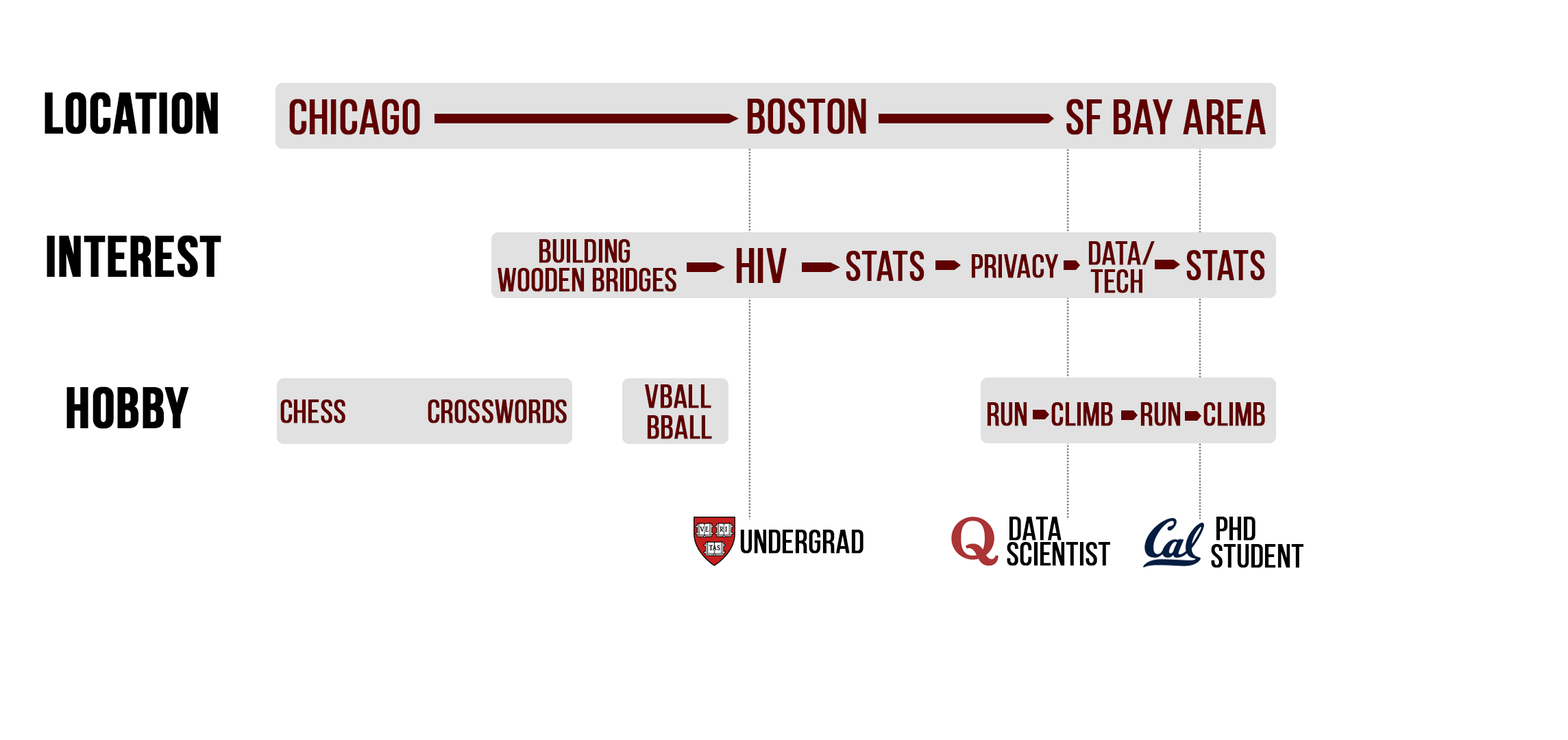
<style>
.page{position:relative;width:1568px;height:740px;background:#ffffff}
.page>*{position:absolute;margin:0}
.t1{font:57.7px "BebasNeueBold";color:#000000;font-weight:bold}
.t2{font:49.3px "BebasNeueRegular";color:#600000;font-weight:bold}
.t3{font:32.9px "BebasNeueRegular";color:#600000;font-weight:bold}
.t4{font:41.1px "BebasNeueRegular";color:#600000;font-weight:bold}
.t5{font:32.9px "BebasNeueRegular";color:#000000;font-weight:bold}
</style>
<div class="page">
<p class="t1" style="left:45px;top:92px;width:173px;height:42px">location</p>
<p class="t2" style="left:289px;top:99px;width:131px;height:36px">Chicago</p>
<p class="t2" style="left:747px;top:98px;width:119px;height:36px">Boston</p>
<p class="t2" style="left:1066px;top:99px;width:200px;height:36px">SF Bay area</p>
<p class="t1" style="left:47px;top:235px;width:174px;height:43px">interest</p>
<p class="t3" style="left:539px;top:239px;width:91px;height:24px">Building</p>
<p class="t3" style="left:1088px;top:241px;width:67px;height:24px">Data/</p>
<p class="t2" style="left:736px;top:248px;width:51px;height:35px">HIV</p>
<p class="t4" style="left:846px;top:251px;width:78px;height:30px">Stats</p>
<p class="t3" style="left:971px;top:254px;width:88px;height:24px">privacy</p>
<p class="t4" style="left:1186px;top:250px;width:79px;height:30px">Stats</p>
<p class="t3" style="left:498px;top:268px;width:178px;height:24px">wooden bridges</p>
<p class="t3" style="left:1090px;top:269px;width:52px;height:24px">TECH</p>
<p class="t1" style="left:66px;top:387px;width:123px;height:42px">hobby</p>
<p class="t3" style="left:645px;top:384px;width:66px;height:24px">vball</p>
<p class="t3" style="left:280px;top:400px;width:65px;height:24px">Chess</p>
<p class="t3" style="left:428px;top:400px;width:139px;height:24px">Crosswords</p>
<p class="t3" style="left:987px;top:402px;width:40px;height:24px">Run</p>
<p class="t3" style="left:1051px;top:402px;width:62px;height:24px">climb</p>
<p class="t3" style="left:1140px;top:402px;width:41px;height:24px">Run</p>
<p class="t3" style="left:1203px;top:402px;width:62px;height:24px">climb</p>
<p class="t3" style="left:647px;top:415px;width:65px;height:24px">Bball</p>
<p class="t5" style="left:1009px;top:517px;width:53px;height:24px">data</p>
<p class="t5" style="left:1216px;top:517px;width:39px;height:24px">PHD</p>
<p class="t5" style="left:740px;top:530px;width:123px;height:24px">undergrad</p>
<p class="t5" style="left:1007px;top:542px;width:103px;height:24px">Scientist</p>
<p class="t5" style="left:1211px;top:544px;width:92px;height:24px">student</p>
</div>
